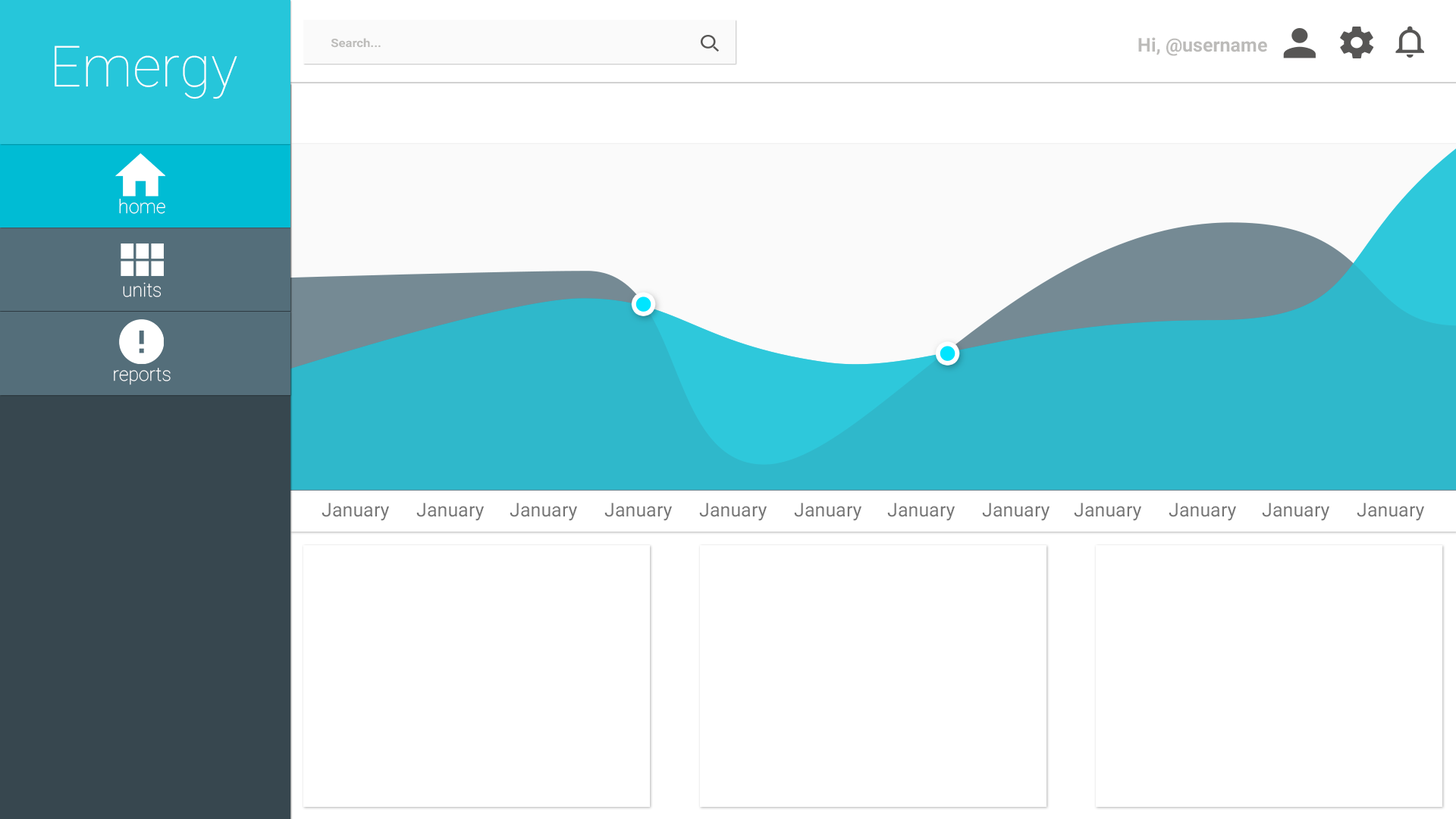
<style>
.page{position:relative;width:1456px;height:819px;background:#ffffff}
.page>*{position:absolute;margin:0}
.t1{font:11.6px "Roboto-Bold";color:#bcbbb9;scale:1.09 1}
.t2{font:19px "Roboto-Bold";color:#bcbbb9}
.t3{font:56.9px "Roboto-Thin";color:#ffffff}
.t4{font:19px "Roboto-Thin";color:#ffffff}
.t5{font:19px "Roboto-Regular";color:#757575}
</style>
<div class="page">
<p class="t1" style="left:331px;top:38px;width:50px;height:10px">Search...</p>
<p class="t2" style="left:1138px;top:37px;width:129px;height:19px">Hi, @username</p>
<p class="t3" style="left:55px;top:45px;width:182px;height:54px">Emergy</p>
<p class="t4" style="left:119px;top:199px;width:46px;height:15px">home</p>
<p class="t4" style="left:123px;top:282px;width:38px;height:15px">units</p>
<p class="t4" style="left:114px;top:368px;width:57px;height:17px">reports</p>
<p class="t5" style="left:322px;top:503px;width:67px;height:18px">January</p>
<p class="t5" style="left:416px;top:503px;width:68px;height:18px">January</p>
<p class="t5" style="left:510px;top:503px;width:67px;height:18px">January</p>
<p class="t5" style="left:604px;top:503px;width:68px;height:18px">January</p>
<p class="t5" style="left:699px;top:503px;width:68px;height:18px">January</p>
<p class="t5" style="left:794px;top:503px;width:67px;height:18px">January</p>
<p class="t5" style="left:887px;top:503px;width:68px;height:18px">January</p>
<p class="t5" style="left:982px;top:503px;width:68px;height:18px">January</p>
<p class="t5" style="left:1074px;top:503px;width:67px;height:18px">January</p>
<p class="t5" style="left:1169px;top:503px;width:67px;height:18px">January</p>
<p class="t5" style="left:1262px;top:503px;width:67px;height:18px">January</p>
<p class="t5" style="left:1357px;top:503px;width:67px;height:18px">January</p>
</div>
